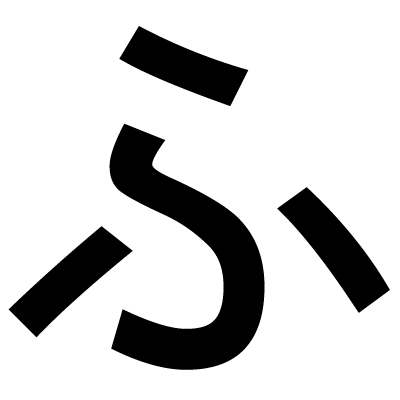
<style>
.page{position:relative;width:400px;height:400px;background:#ffffff}
.page>*{position:absolute;margin:0}
.t1{font:416.7px "MS-PGothic";color:#000000}
</style>
<div class="page">
<p class="t1" style="left:8px;top:26px;width:382px;height:344px">ふ</p>
</div>
